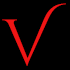
<style>
.page{position:relative;width:70px;height:70px;background:#000000}
.page>*{position:absolute;margin:0}
.t1{font:65px "CinzelDecorative-Regular";color:#ef1515}
</style>
<div class="page">
<p class="t1" style="left:2px;top:3px;width:64px;height:63px">V</p>
</div>
